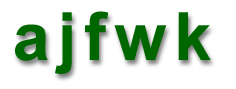
<style>
.page{position:relative;width:236px;height:89px;background:#ffffff}
.page>*{position:absolute;margin:0}
.t1{font:66.7px "Arial-BoldMT";letter-spacing:0.12em;color:#006600}
</style>
<div class="page">
<p class="t1" style="left:15px;top:11px;width:196px;height:63px">ajfwk</p>
</div>
